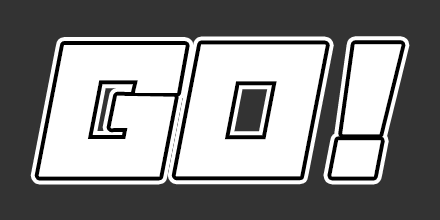
<style>
.page{position:relative;width:440px;height:220px;background:#333333}
.page>*{position:absolute;margin:0}
.t1{font:140px "GN-KMBFont-UB-OldstyleKana";letter-spacing:0.05em;color:#ffffff;font-weight:bold;font-style:italic;scale:1.1 1}
</style>
<div class="page">
<p class="t1" style="left:38px;top:44px;width:364px;height:133px">GO!</p>
</div>
